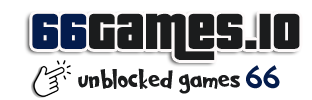
<style>
.page{position:relative;width:312px;height:100px;background:#ffffff}
.page>*{position:absolute;margin:0}
.t1{font:55px "PricedownBl-Regular";color:#1b1c1d}
.t2{font:55px "PricedownBl-Regular";color:#041c4d}
.t3{font:30px "Grinched2.0";color:#1b1c1d}
.t4{font:30px "Grinched2.0";color:#041c4d}
</style>
<div class="page">
<p class="t1" style="left:32px;top:13px;width:268px;height:47px"><span class="t2">66</span>Games.io</p>
<p class="t3" style="left:78px;top:65px;width:202px;height:29px">unblocked games <span class="t4">66</span></p>
</div>
